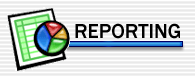
<style>
.page{position:relative;width:195px;height:76px}
.page>*{position:absolute;margin:0}
.t1{font:21px "FranklinGothic-Medium";color:#000000}
</style>
<div class="page">
<p class="t1" style="left:75px;top:23px;width:105px;height:16px">REPORTING</p>
</div>
